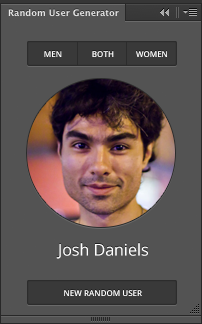
<style>
.page{position:relative;width:202px;height:324px;background:#535353}
.page>*{position:absolute;margin:0}
.t1{font:8px "OpenSans-Semibold";color:#ffffff}
.t2{font:8px "OpenSans-Semibold"}
.t3{font:16px "OpenSans";color:#ffffff}
</style>
<div class="page">
<p class="t1" style="left:44px;top:51px;width:18px;height:6px">MEN</p>
<p class="t1" style="left:44px;top:51px;width:18px;height:6px">MEN</p>
<p class="t2" style="left:92px;top:51px;width:22px;height:6px">BOTH</p>
<p class="t2" style="left:92px;top:51px;width:22px;height:6px">BOTH</p>
<p class="t1" style="left:136px;top:51px;width:31px;height:6px">WOMEN</p>
<p class="t1" style="left:136px;top:51px;width:31px;height:6px">WOMEN</p>
<p class="t3" style="left:56px;top:243px;width:92px;height:16px">Josh Daniels</p>
<p class="t1" style="left:64px;top:290px;width:78px;height:6px">NEW RANDOM USER</p>
<p class="t1" style="left:64px;top:290px;width:78px;height:6px">NEW RANDOM USER</p>
</div>
